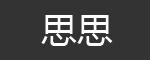
<style>
.page{position:relative;width:150px;height:60px;background:#333333}
.page>*{position:absolute;margin:0}
.t1{font:36px "MicrosoftYaHei";color:#ffffff}
</style>
<div class="page">
<p class="t1" style="left:41px;top:15px;width:72px;height:31px">思思</p>
</div>
